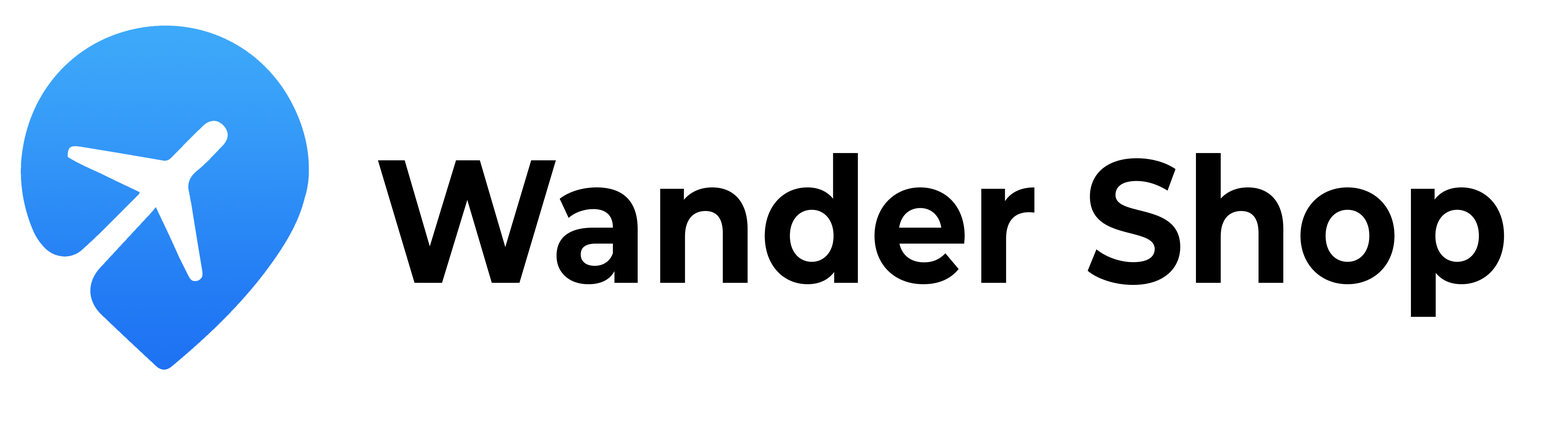
<style>
.page{position:relative;width:1568px;height:431px;background:#ffffff}
.page>*{position:absolute;margin:0}
.t1{font:174.8px "Montserrat-Bold";color:#000000;scale:0.91 1}
</style>
<div class="page">
<p class="t1" style="left:378px;top:153px;width:1126px;height:164px">Wander Shop</p>
</div>
